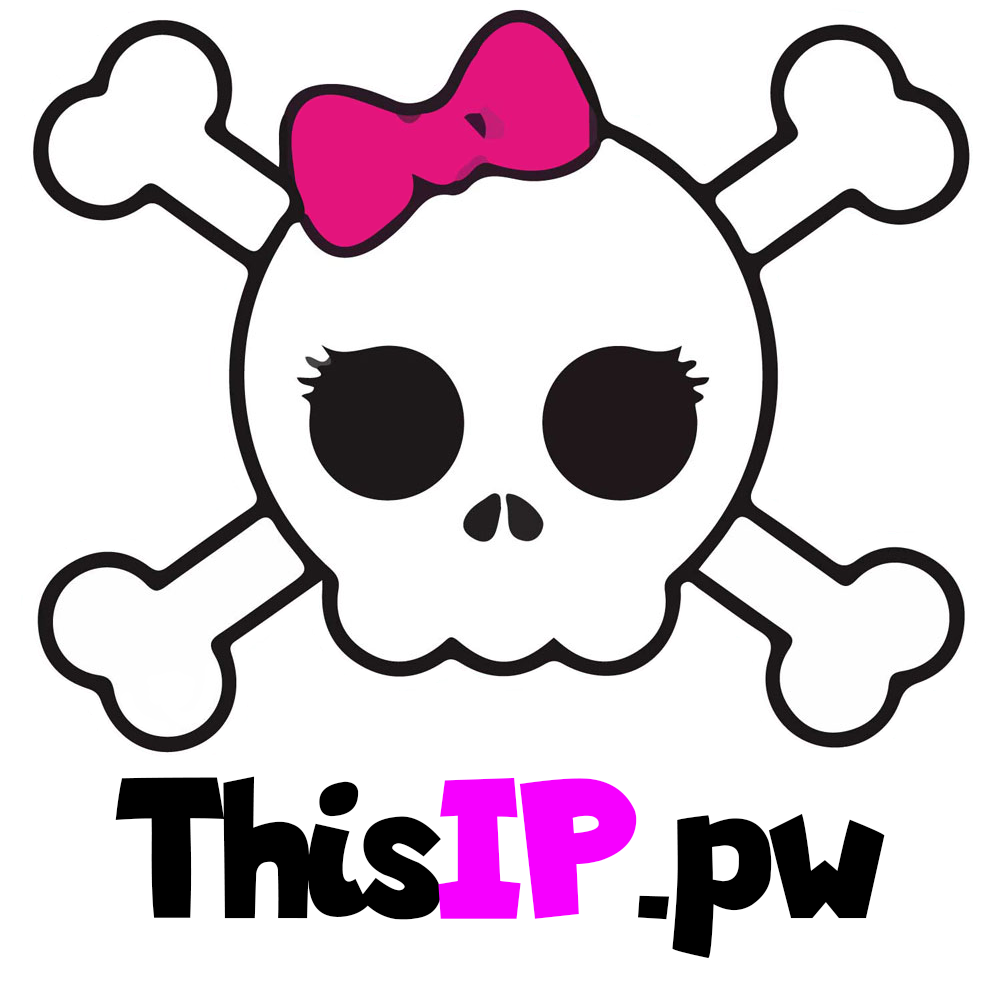
<style>
.page{position:relative;width:1000px;height:1000px;background:#ffffff}
.page>*{position:absolute;margin:0}
.t1{font:200px "LapsusPro-Bold";color:#000000}
.t2{font:200px "LapsusPro-Bold";color:#f600ff}
</style>
<div class="page">
<p class="t1" style="left:115px;top:776px;width:770px;height:183px">This<span class="t2">IP</span>.pw</p>
</div>
